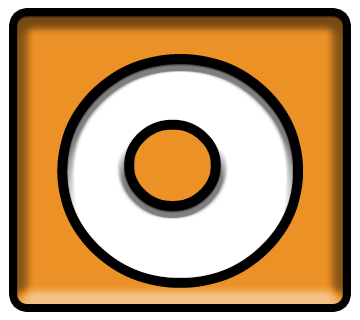
<style>
.page{position:relative;width:360px;height:320px;background:#ffffff}
.page>*{position:absolute;margin:0}
.t1{font:312.5px "Funhouse";color:#ffffff;scale:0.91 1}
</style>
<div class="page">
<p class="t1" style="left:67px;top:64px;width:226px;height:214px">0</p>
</div>
